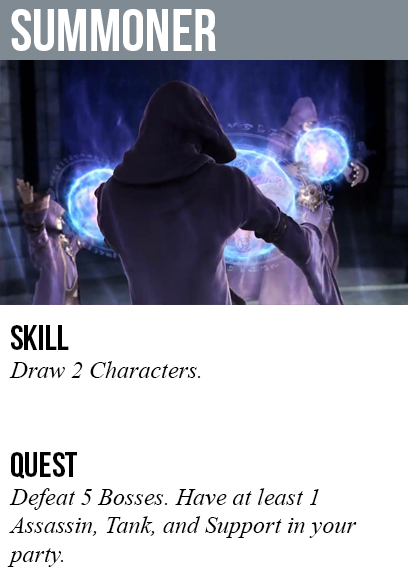
<style>
.page{position:relative;width:408px;height:585px;background:#ffffff}
.page>*{position:absolute;margin:0}
.t1{font:60px "BebasNeue";color:#ffffff}
.t2{font:36px "BebasNeue";color:#000000}
.t3{font:24px "TimesNewRomanPS-ItalicMT";color:#000000}
</style>
<div class="page">
<p class="t1" style="left:11px;top:9px;width:205px;height:42px">summoner</p>
<p class="t2" style="left:11px;top:325px;width:58px;height:25px">skill</p>
<p class="t3" style="left:9px;top:361px;width:192px;height:17px">Draw 2 Characters.</p>
<p class="t2" style="left:11px;top:452px;width:66px;height:27px">quest</p>
<p class="t3" style="left:7px;top:488px;width:350px;height:79px">Defeat 5 Bosses. Have at least 1<br>Assassin, Tank, and Support in your<br>party.</p>
</div>
